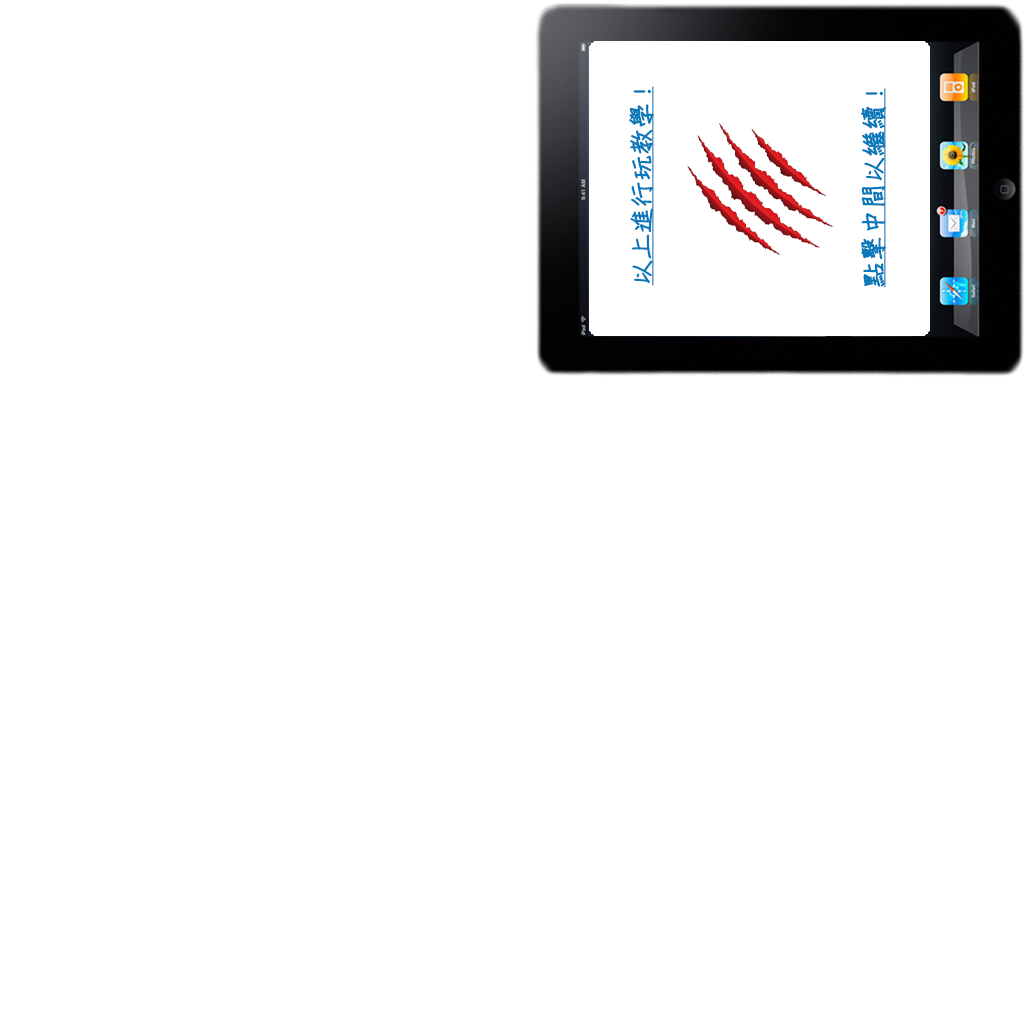
<style>
.page{position:relative;width:1024px;height:1024px;background:#ffffff}
.page>*{position:absolute;margin:0}
.t1{font:25.5px "DFChu-W4-WINP-BF";color:#0979ba;font-weight:bold;text-decoration:underline}
</style>
<div class="page">
<p class="t1" style="left:629px;top:86px;width:25px;height:200px;rotate:-90deg">以上進行玩教學!</p>
<p class="t1" style="left:861px;top:88px;width:25px;height:200px;rotate:-90deg">點擊中間以繼續!</p>
</div>
